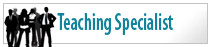
<style>
.page{position:relative;width:211px;height:47px;background:#ffffff}
.page>*{position:absolute;margin:0}
.t1{font:24px "MyriadPro-SemiboldCond";color:#11839a;scale:0.78 1}
</style>
<div class="page">
<p class="t1" style="left:57px;top:13px;width:116px;height:22px">Teaching Specialist</p>
</div>
